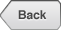
<style>
.page{position:relative;width:61px;height:30px}
.page>*{position:absolute;margin:0}
.t1{font:12px "Helvetica-Bold";color:#474747}
</style>
<div class="page">
<p class="t1" style="left:18px;top:10px;width:29px;height:10px">Back</p>
</div>
